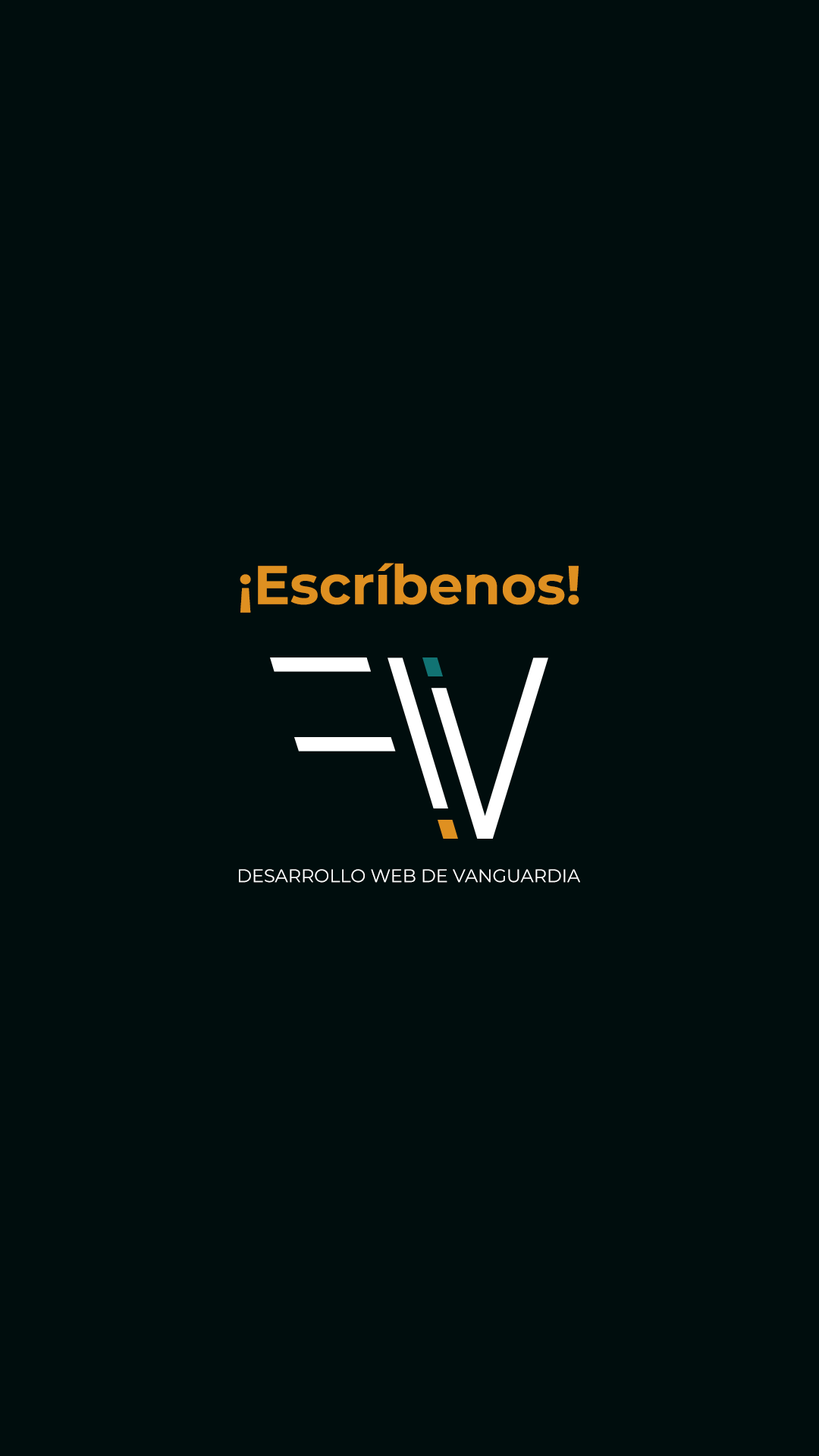
<style>
.page{position:relative;width:819px;height:1456px;background:#000d0d}
.page>*{position:absolute;margin:0}
.t1{font:54.6px "MontserratRoman-Bold";color:#df9021}
.t2{font:18.1px "MontserratRoman-Regular";color:#ffffff}
</style>
<div class="page">
<p class="t1" style="left:240px;top:563px;width:339px;height:50px">¡Escríbenos!</p>
<p class="t2" style="left:239px;top:869px;width:341px;height:14px">DESARROLLO WEB DE VANGUARDIA</p>
</div>
